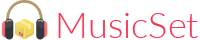
<style>
.page{position:relative;width:200px;height:40px;background:#ffffff}
.page>*{position:absolute;margin:0}
.t1{font:36px "Lato-Light";letter-spacing:0.005em;color:#f63854}
</style>
<div class="page">
<p class="t1" style="left:58px;top:13px;width:140px;height:25px">MusicSet</p>
</div>
